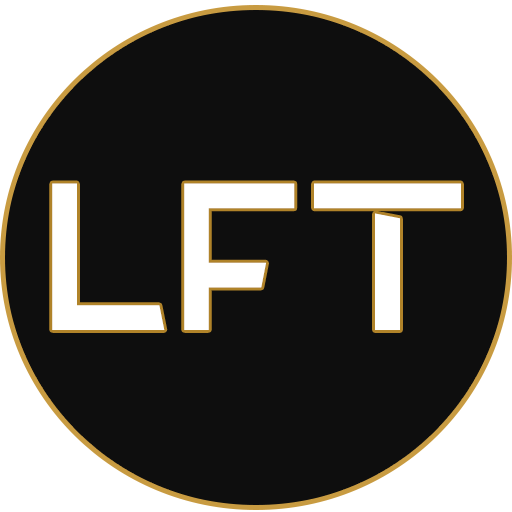
<style>
.page{position:relative;width:512px;height:512px;background:#0e0e0e}
.page>*{position:absolute;margin:0}
.t1{font:200px "Elianto-Regular";color:#ffffff}
</style>
<div class="page">
<p class="t1" style="left:52px;top:183px;width:409px;height:147px">LFT</p>
</div>
